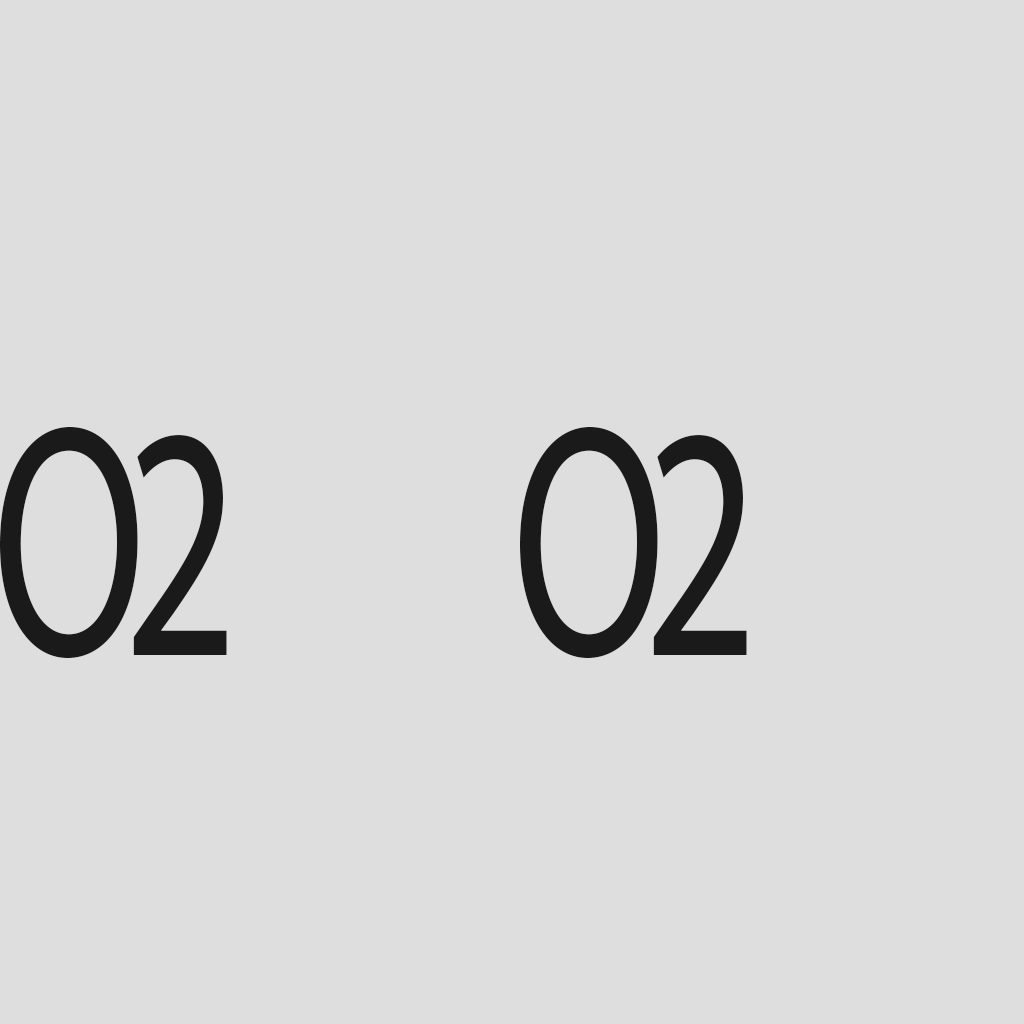
<style>
.page{position:relative;width:1024px;height:1024px;background:#dedede}
.page>*{position:absolute;margin:0}
.t1{font:333.3px "MyriadPro-Regular";letter-spacing:-0.1em;color:#1a1a1a;scale:0.67 1}
</style>
<div class="page">
<p class="t1" style="left:0px;top:426px;width:227px;height:233px">O2</p>
<p class="t1" style="left:520px;top:426px;width:227px;height:233px">O2</p>
</div>
